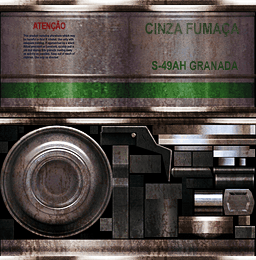
<style>
.page{position:relative;width:256px;height:260px}
.page>*{position:absolute;margin:0}
.t1{font:9.3px "Arial-BoldMT";letter-spacing:-0.025em;color:#7e1110;font-weight:bold;scale:0.71 1}
.t2{font:15.1px "Arial-BoldMT";letter-spacing:0.005em;color:#273b20;scale:0.81 1}
.t3{font:12px "Arial-BoldMT";letter-spacing:0.005em;color:#1d3f19;text-transform:uppercase;scale:0.8 1}
</style>
<div class="page">
<p class="t1" style="left:33px;top:20px;width:33px;height:11px">ATENÇÃO</p>
<p class="t2" style="left:145px;top:22px;width:95px;height:15px">CINZA FUMAÇA</p>
<p class="t3" style="left:189px;top:61px;width:49px;height:10px">granada</p>
</div>
